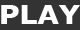
<style>
.page{position:relative;width:80px;height:30px;background:#333333}
.page>*{position:absolute;margin:0}
.t1{font:25.8px "Tahoma-Bold";color:#ffffff;scale:1.22 1}
</style>
<div class="page">
<p class="t1" style="left:1px;top:5px;width:79px;height:19px">PLAY</p>
</div>
